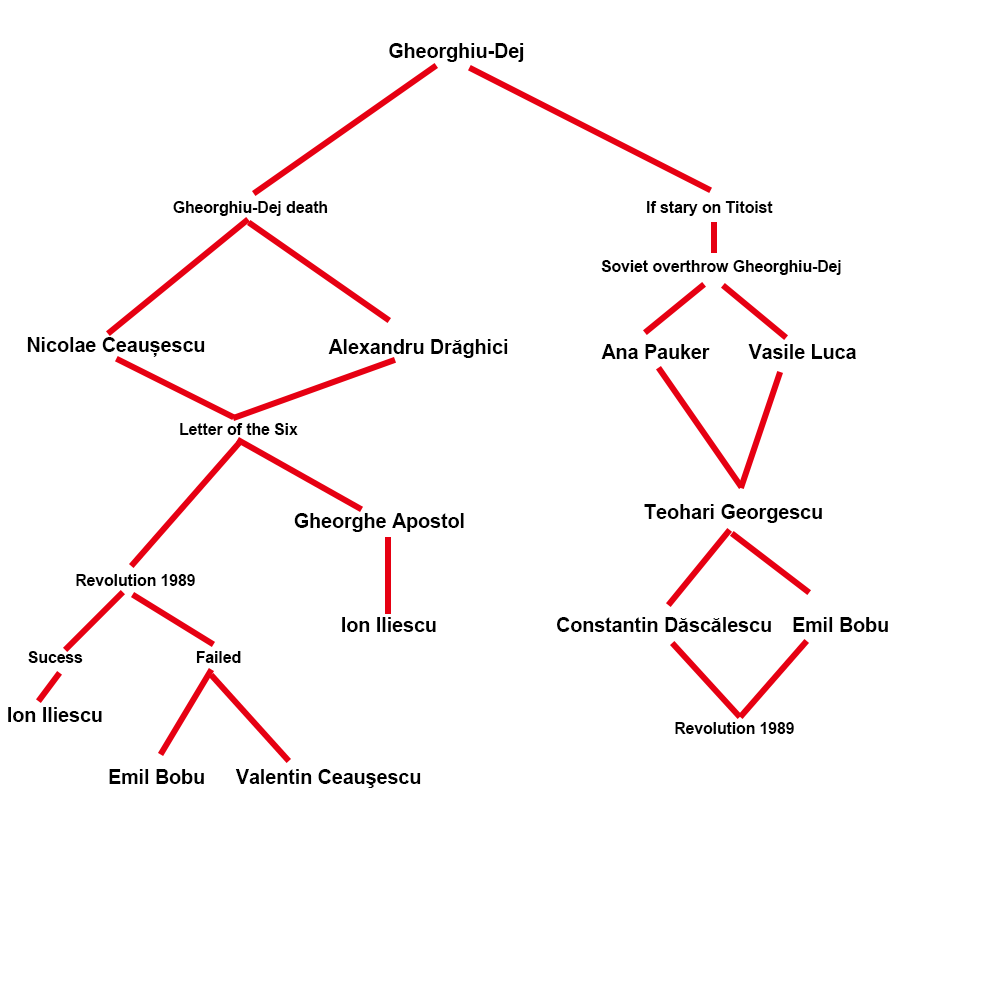
<style>
.page{position:relative;width:1000px;height:1000px;background:#ffffff}
.page>*{position:absolute;margin:0}
.t1{font:19.6px "Arial-BoldMT";color:#000000}
.t2{font:15.7px "Arial-BoldMT";color:#000000}
</style>
<div class="page">
<p class="t1" style="left:389px;top:43px;width:135px;height:19px">Gheorghiu-Dej</p>
<p class="t2" style="left:173px;top:201px;width:155px;height:15px">Gheorghiu-Dej death</p>
<p class="t2" style="left:647px;top:201px;width:126px;height:15px">If stary on Titoist</p>
<p class="t2" style="left:601px;top:260px;width:240px;height:15px">Soviet overthrow Gheorghiu-Dej</p>
<p class="t1" style="left:27px;top:337px;width:178px;height:20px">Nicolae Ceaușescu</p>
<p class="t1" style="left:328px;top:339px;width:180px;height:19px">Alexandru Drăghici</p>
<p class="t1" style="left:601px;top:344px;width:109px;height:15px">Ana Pauker</p>
<p class="t1" style="left:748px;top:344px;width:108px;height:15px">Vasile Luca</p>
<p class="t2" style="left:180px;top:423px;width:118px;height:12px">Letter of the Six</p>
<p class="t1" style="left:644px;top:504px;width:178px;height:19px">Teohari Georgescu</p>
<p class="t1" style="left:294px;top:513px;width:170px;height:19px">Gheorghe Apostol</p>
<p class="t2" style="left:76px;top:574px;width:119px;height:12px">Revolution 1989</p>
<p class="t1" style="left:342px;top:617px;width:94px;height:15px">Ion Iliescu</p>
<p class="t1" style="left:557px;top:617px;width:214px;height:15px">Constantin Dăscălescu</p>
<p class="t1" style="left:793px;top:617px;width:95px;height:15px">Emil Bobu</p>
<p class="t2" style="left:28px;top:651px;width:55px;height:12px">Sucess</p>
<p class="t2" style="left:196px;top:651px;width:45px;height:12px">Failed</p>
<p class="t1" style="left:8px;top:707px;width:94px;height:15px">Ion Iliescu</p>
<p class="t2" style="left:675px;top:722px;width:119px;height:12px">Revolution 1989</p>
<p class="t1" style="left:109px;top:769px;width:95px;height:15px">Emil Bobu</p>
<p class="t1" style="left:235px;top:769px;width:186px;height:19px">Valentin Ceauşescu</p>
</div>
